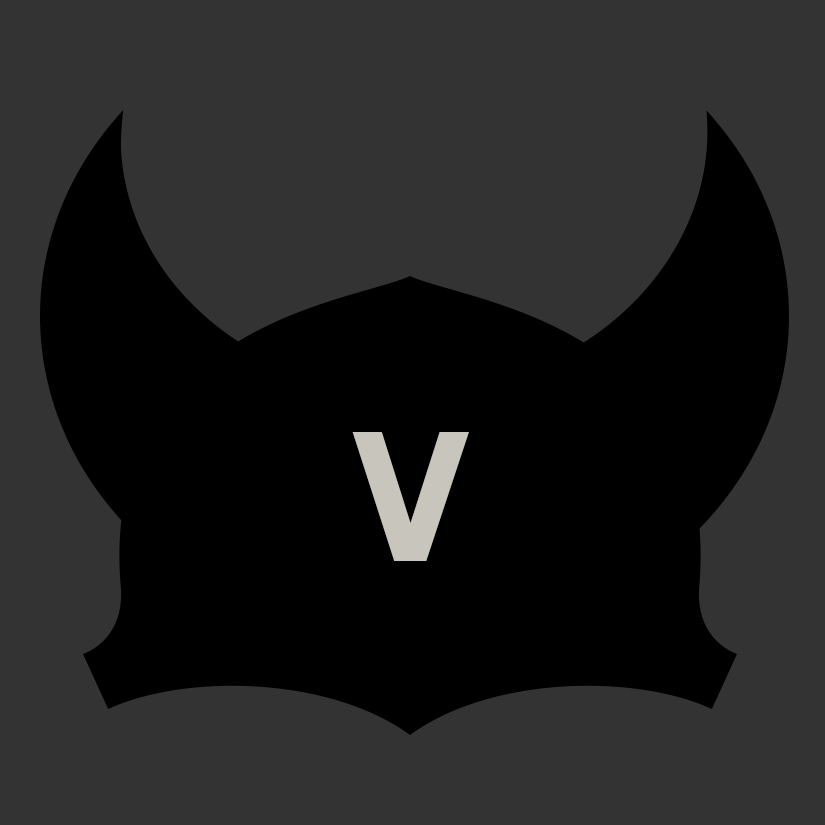
<style>
.page{position:relative;width:825px;height:825px;background:#333333}
.page>*{position:absolute;margin:0}
.t1{font:180.1px "HelveticaNeue-Bold";letter-spacing:-0.01em;color:#c8c5bd}
</style>
<div class="page">
<p class="t1" style="left:352px;top:432px;width:117px;height:129px">V</p>
</div>
